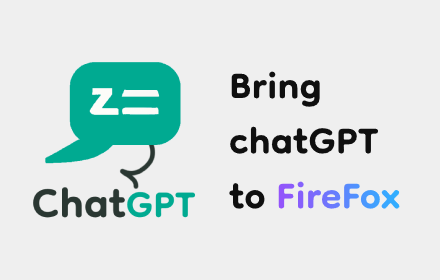
<style>
.page{position:relative;width:440px;height:280px;background:#efefef}
.page>*{position:absolute;margin:0}
.t1{font:60px/55px "Dongle-Bold";color:#0f0f0f}
.t2{font:60px "Dongle-Bold"}
</style>
<div class="page">
<p class="t1" style="left:229px;top:71px;width:150px;height:138px">Bring <br>chatGPT <br>to</p>
<p class="t2" style="left:278px;top:181px;width:122px;height:28px">FireFox</p>
</div>
